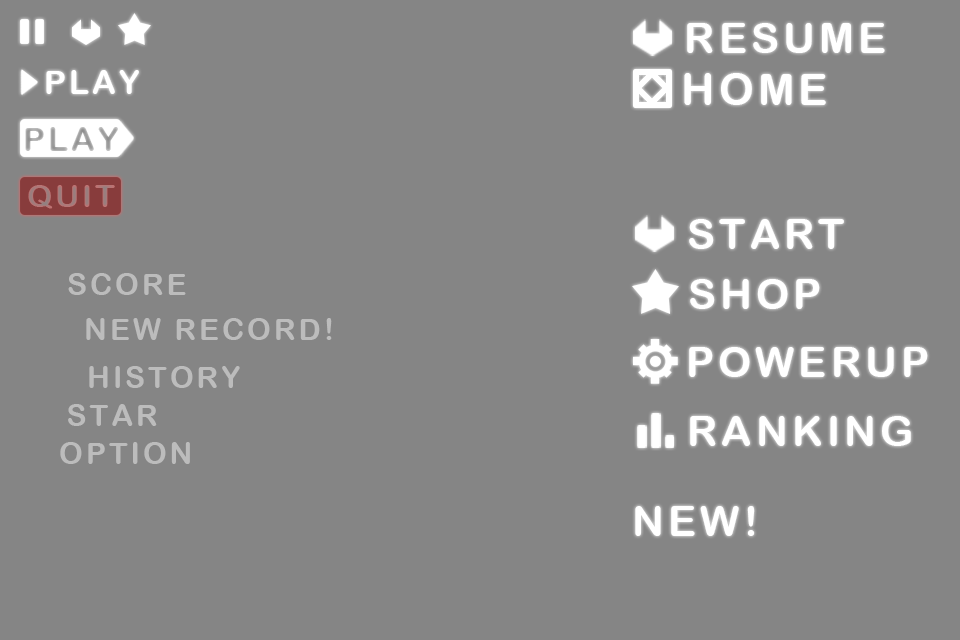
<style>
.page{position:relative;width:960px;height:640px;background:#858585}
.page>*{position:absolute;margin:0}
.t1{font:41.8px "ArialRoundedMTBold";letter-spacing:0.1em;color:#ffffff}
.t2{font:32.6px "ArialRoundedMTBold";letter-spacing:0.1em;color:#ffffff}
.t3{font:43.6px "ArialRoundedMTBold";letter-spacing:0.1em;color:#ffffff}
.t4{font:30px "ArialRoundedMTBold";letter-spacing:0.1em;color:#bcbcbc}
</style>
<div class="page">
<p class="t1" style="left:687px;top:23px;width:198px;height:30px">RESUME</p>
<p class="t2" style="left:46px;top:70px;width:93px;height:24px">PLAY</p>
<p class="t3" style="left:684px;top:73px;width:142px;height:32px">HOME</p>
<p class="t1" style="left:689px;top:219px;width:155px;height:30px">START</p>
<p class="t4" style="left:68px;top:273px;width:118px;height:22px">SCORE</p>
<p class="t1" style="left:690px;top:279px;width:130px;height:30px">SHOP</p>
<p class="t4" style="left:86px;top:318px;width:246px;height:22px">NEW RECORD!</p>
<p class="t1" style="left:689px;top:347px;width:239px;height:30px">POWERUP</p>
<p class="t4" style="left:89px;top:366px;width:151px;height:22px">HISTORY</p>
<p class="t4" style="left:68px;top:404px;width:89px;height:22px">STAR</p>
<p class="t1" style="left:690px;top:416px;width:221px;height:30px">RANKING</p>
<p class="t4" style="left:60px;top:442px;width:130px;height:22px">OPTION</p>
<p class="t1" style="left:635px;top:506px;width:120px;height:30px">NEW!</p>
</div>
